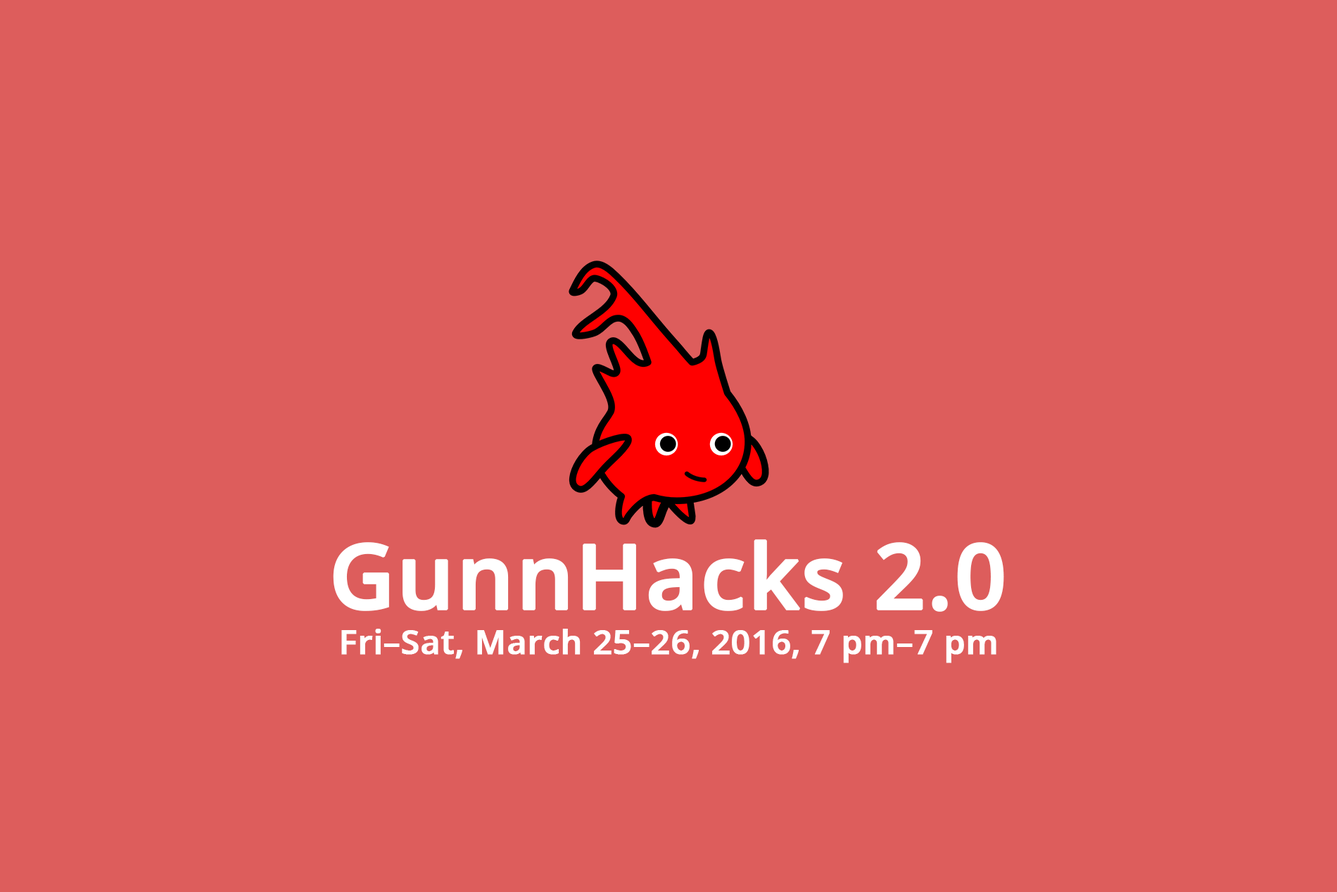
<style>
.page{position:relative;width:1337px;height:892px;background:#dd5d5c}
.page>*{position:absolute;margin:0}
.t1{font:90.1px "OpenSans-Semibold";color:#ffffff;font-weight:bold}
.t2{font:33.8px "OpenSans-Semibold";color:#ffffff;font-weight:bold}
</style>
<div class="page">
<p class="t1" style="left:333px;top:539px;width:671px;height:73px">GunnHacks 2.0</p>
<p class="t2" style="left:341px;top:628px;width:656px;height:35px">Fri–Sat, March 25–26, 2016, 7 pm–7 pm</p>
</div>
